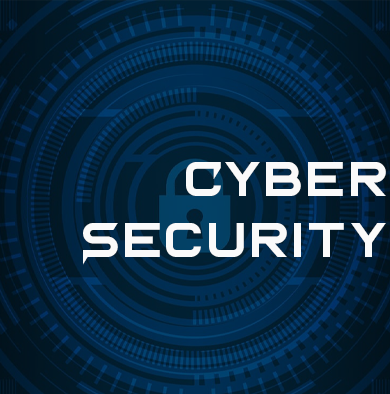
<style>
.page{position:relative;width:390px;height:394px}
.page>*{position:absolute;margin:0}
.t1{font:51px "BordDemo";color:#fafafa}
</style>
<div class="page">
<p class="t1" style="left:83px;top:162px;width:303px;height:103px;text-align:right">Cyber<br>Security</p>
</div>
